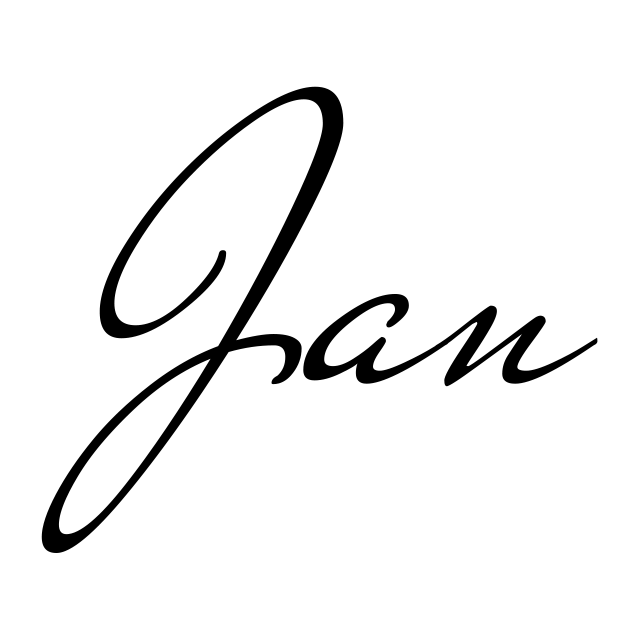
<style>
.page{position:relative;width:640px;height:640px;background:#ffffff}
.page>*{position:absolute;margin:0}
.t1{font:416.7px "MrDeHaviland-Regular";color:#000000}
</style>
<div class="page">
<p class="t1" style="left:41px;top:86px;width:557px;height:467px">Jan</p>
</div>
